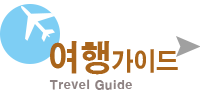
<style>
.page{position:relative;width:200px;height:100px;background:#ffffff}
.page>*{position:absolute;margin:0}
.t1{font:25px "H2gtrE";color:#aa651b;scale:0.9 1}
.t2{font:35px "H2gtrE";color:#aa651b;scale:0.9 1}
.t3{font:12px "H2gtrE";color:#8f8383}
</style>
<div class="page">
<p class="t1" style="left:50px;top:41px;width:128px;height:34px"><span class="t2">여행</span>가이드</p>
<p class="t3" style="left:49px;top:79px;width:83px;height:11px">Trevel Guide</p>
</div>
